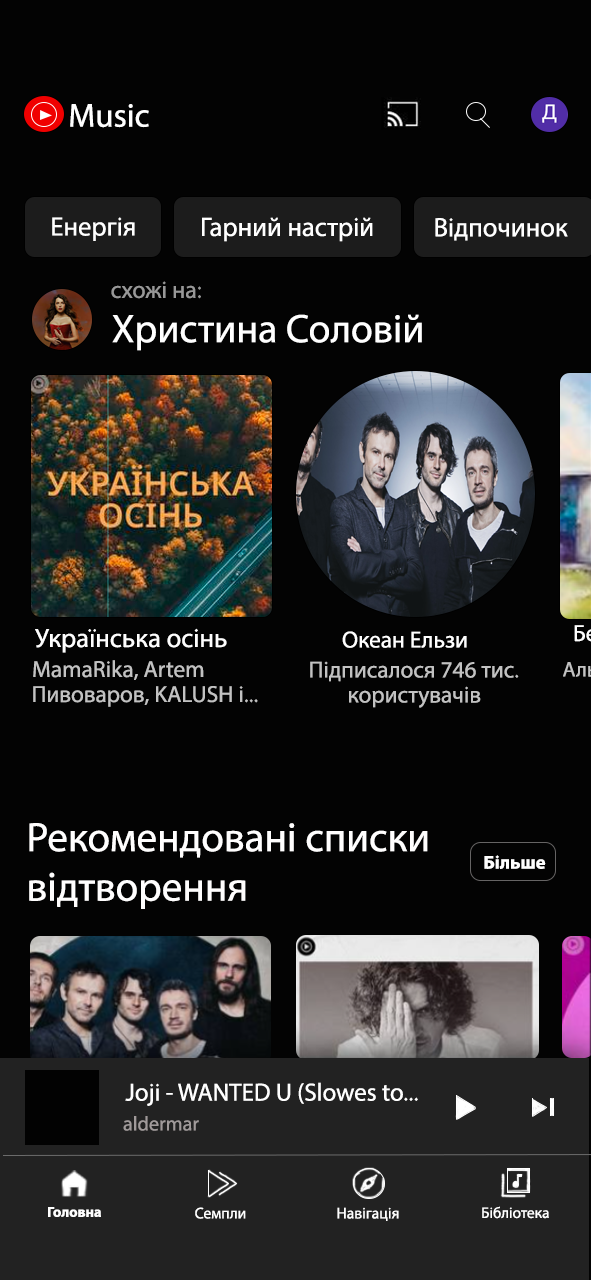
<style>
.page{position:relative;width:591px;height:1280px;background:#030303}
.page>*{position:absolute;margin:0}
.t1{font:33.3px "MyriadPro-Regular";color:#ffffff}
.t2{font:26.7px "MyriadPro-Regular";color:#ffffff}
.t3{font:24px "MyriadPro-Regular";color:#989898}
.t4{font:40px "MyriadPro-Regular";color:#ffffff}
.t5{font:26.7px "MyriadPro-Regular";color:#fefefe}
.t6{font:23.3px "MyriadPro-Regular";color:#ffffff}
.t7{font:23.3px "MyriadPro-Regular";color:#c2c2c2}
.t8{font:41.2px "MyriadPro-Regular";color:#fffefe}
.t9{font:18.7px "MyriadPro-Bold";color:#ffffff}
.t10{font:25px "MyriadPro-Regular";color:#ffffff}
.t11{font:20.2px "MyriadPro-Regular";color:#a09a9a}
.t12{font:15.4px "MyriadPro-Regular";color:#ffffff}
.t13{font:14.5px "MyriadPro-Bold";color:#ffffff}
.t14{font:15.6px "MyriadPro-Regular";color:#ffffff}
.t15{font:15.7px "MyriadPro-Regular";color:#ffffff}
</style>
<div class="page">
<p class="t1" style="left:70px;top:104px;width:79px;height:24px">Music</p>
<p class="t2" style="left:52px;top:217px;width:83px;height:24px">Енергія</p>
<p class="t2" style="left:202px;top:217px;width:171px;height:25px">Гарний настрій</p>
<p class="t2" style="left:435px;top:218px;width:133px;height:23px">Відпочинок</p>
<p class="t3" style="left:111px;top:281px;width:90px;height:18px">схожі на:</p>
<p class="t4" style="left:112px;top:314px;width:310px;height:37px">Христина Соловій</p>
<p class="t5" style="left:35px;top:628px;width:192px;height:25px">Українська осінь</p>
<p class="t6" style="left:342px;top:631px;width:125px;height:17px">Океан Ельзи</p>
<p class="t7" style="left:33px;top:660px;width:171px;height:20px">MamaRika, Artem</p>
<p class="t7" style="left:310px;top:661px;width:209px;height:21px">Підписалося 746 тис.</p>
<p class="t7" style="left:33px;top:686px;width:225px;height:21px">Пивоваров, KALUSH і...</p>
<p class="t7" style="left:349px;top:686px;width:132px;height:22px">користувачів</p>
<p class="t8" style="left:29px;top:823px;width:399px;height:86px">Рекомендовані списки<br>відтворення</p>
<p class="t9" style="left:484px;top:855px;width:62px;height:14px">Більше</p>
<p class="t10" style="left:125px;top:1082px;width:293px;height:24px">Joji - WANTED U (Slowes to...</p>
<p class="t11" style="left:123px;top:1116px;width:76px;height:15px">aldermar</p>
<p class="t12" style="left:482px;top:1206px;width:67px;height:13px">Бібліотека</p>
<p class="t13" style="left:48px;top:1207px;width:53px;height:10px">Головна</p>
<p class="t14" style="left:195px;top:1207px;width:51px;height:12px">Семпли</p>
<p class="t15" style="left:337px;top:1207px;width:62px;height:14px">Навігація</p>
</div>
